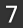
<style>
.page{position:relative;width:23px;height:28px;background:#333333}
.page>*{position:absolute;margin:0}
.t1{font:24px "Outfit-Regular";color:#ffffff;font-weight:bold;font-style:italic}
</style>
<div class="page">
<p class="t1" style="left:6px;top:5px;width:11px;height:18px">7</p>
</div>
